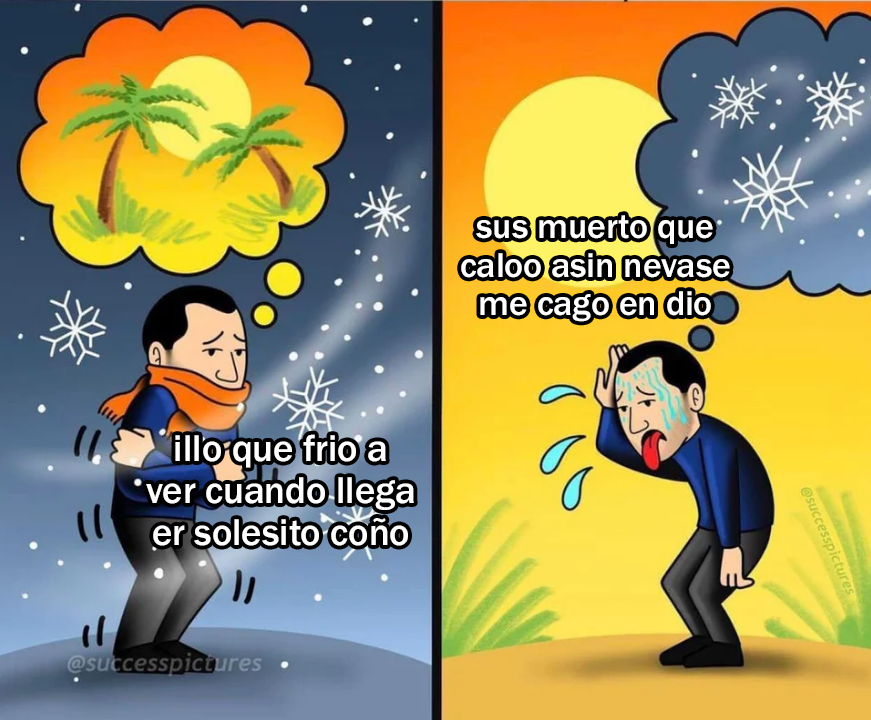
<style>
.page{position:relative;width:871px;height:720px}
.page>*{position:absolute;margin:0}
.t1{font:35.7px "FranklinGothic-Medium";color:#ffffff}
.t2{font:38.5px "FranklinGothic-Medium";color:#ffffff}
</style>
<div class="page">
<p class="t1" style="left:461px;top:215px;width:269px;height:107px;text-align:center">sus muerto que<br>caloo asin nevase<br>me cago en dio</p>
<p class="t2" style="left:146px;top:434px;width:268px;height:112px;text-align:center">illo que frio a<br>ver cuando llega<br>er solesito coño</p>
</div>
